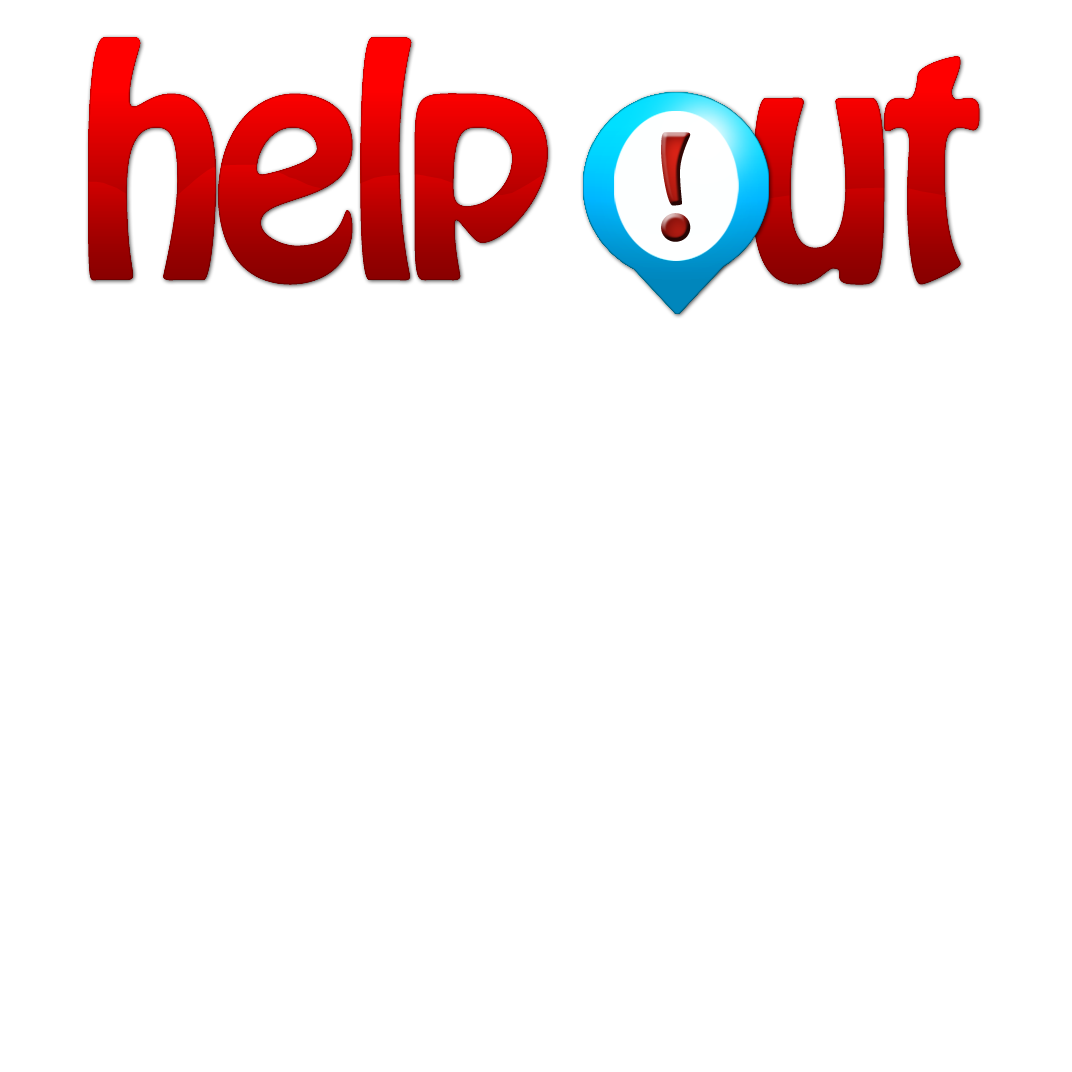
<style>
.page{position:relative;width:1072px;height:1072px;background:#ffffff}
.page>*{position:absolute;margin:0}
.t1{font:284.5px "HoboStd";letter-spacing:-0.058em}
.t2{font:129px "HoboStd";letter-spacing:-0.058em}
</style>
<div class="page">
<p class="t1" style="left:88px;top:37px;width:892px;height:248px">help out</p>
<p class="t2" style="left:661px;top:132px;width:30px;height:110px">!</p>
</div>
